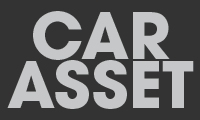
<style>
.page{position:relative;width:200px;height:120px;background:#333333}
.page>*{position:absolute;margin:0}
.t1{font:63.5px/48.9px "ITCAvantGardePro-Bold";color:#c6c7c9;text-transform:uppercase}
</style>
<div class="page">
<p class="t1" style="left:7px;top:11px;width:187px;height:98px;text-align:center">Car<br>asset</p>
</div>
